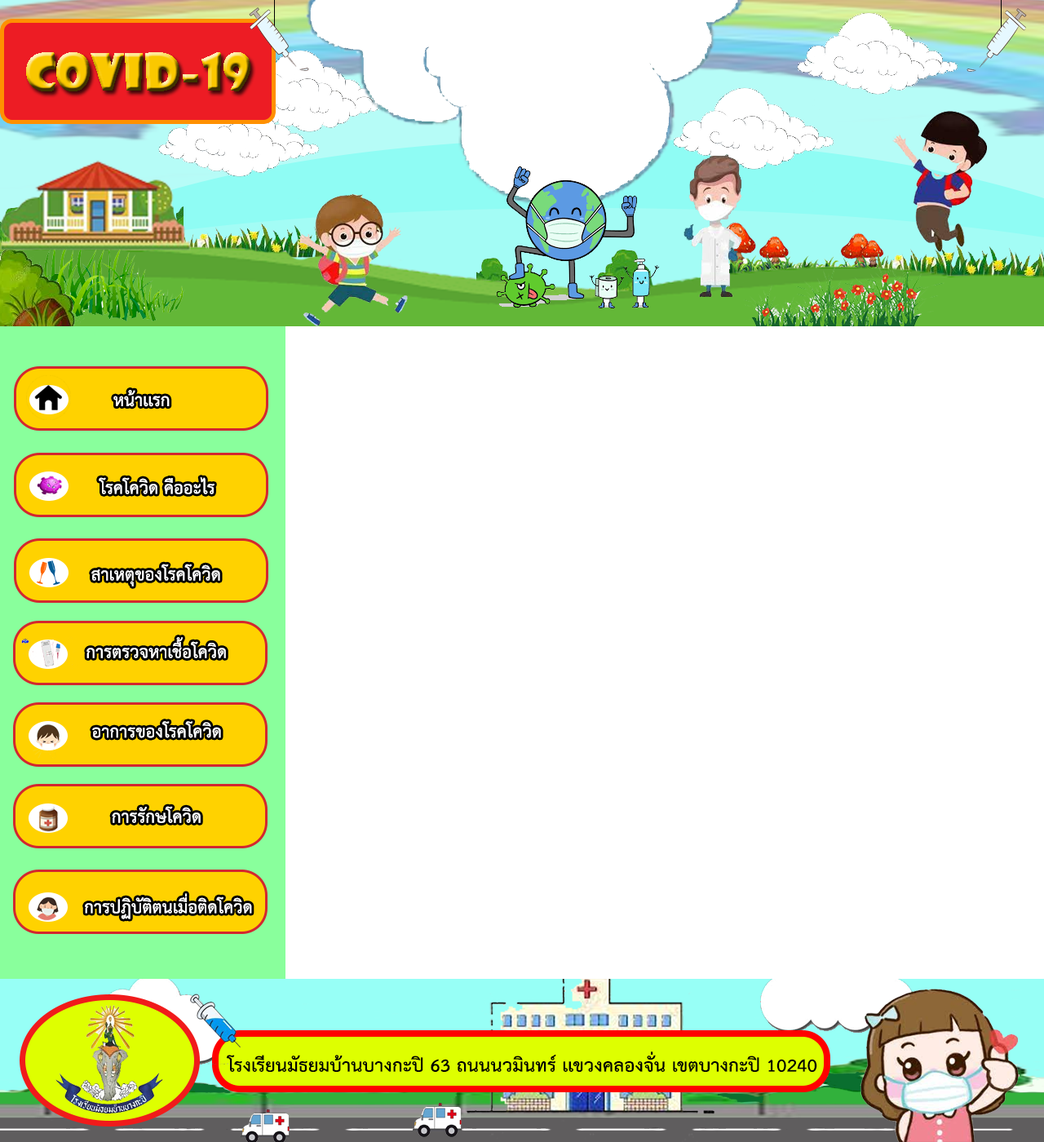
<style>
.page{position:relative;width:1044px;height:1142px;background:#ffffff}
.page>*{position:absolute;margin:0}
.t1{font:24.5px "THSarabunPSK-Bold";color:#ffffff}
</style>
<div class="page">
<p class="t1" style="left:113px;top:390px;width:57px;height:17px">หน้าเเรก</p>
<p class="t1" style="left:99px;top:477px;width:116px;height:17px">โรคโควิด คืออะไร</p>
<p class="t1" style="left:91px;top:564px;width:129px;height:23px">สาเหตุของโรคโควิด</p>
<p class="t1" style="left:86px;top:637px;width:140px;height:21px">การตรวจหาเชื้อโควิด</p>
<p class="t1" style="left:92px;top:721px;width:129px;height:17px">อาการของโรคโควิด</p>
<p class="t1" style="left:112px;top:806px;width:89px;height:17px">การรักษโควิด</p>
<p class="t1" style="left:85px;top:893px;width:167px;height:26px">การปฏิบัติตนเมื่อติดโควิด</p>
</div>
